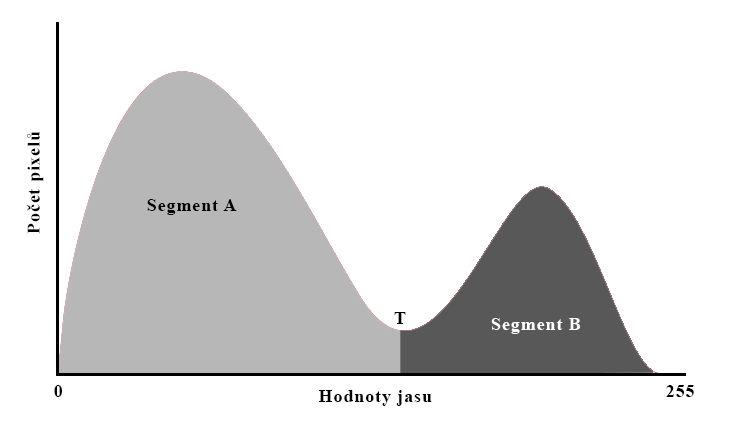
<style>
.page{position:relative;width:742px;height:424px;background:#ffffff}
.page>*{position:absolute;margin:0}
.t1{font:17.6px "TimesNewRomanPS-BoldMT";letter-spacing:0.05em;color:#000000}
.t2{font:18px "TimesNewRomanPS-BoldMT";letter-spacing:0.05em;color:#000000}
.t3{font:18px "TimesNewRomanPS-BoldMT";letter-spacing:0.05em;color:#ffffff}
</style>
<div class="page">
<p class="t1" style="left:27px;top:131px;width:17px;height:103px;rotate:-90deg">Počet pixelů</p>
<p class="t2" style="left:147px;top:199px;width:90px;height:16px">Segment A</p>
<p class="t1" style="left:394px;top:312px;width:12px;height:12px">T</p>
<p class="t3" style="left:491px;top:318px;width:89px;height:16px">Segment B</p>
<p class="t2" style="left:54px;top:385px;width:8px;height:12px">0</p>
<p class="t2" style="left:318px;top:390px;width:114px;height:16px">Hodnoty jasu</p>
<p class="t2" style="left:666px;top:385px;width:28px;height:12px">255</p>
</div>
